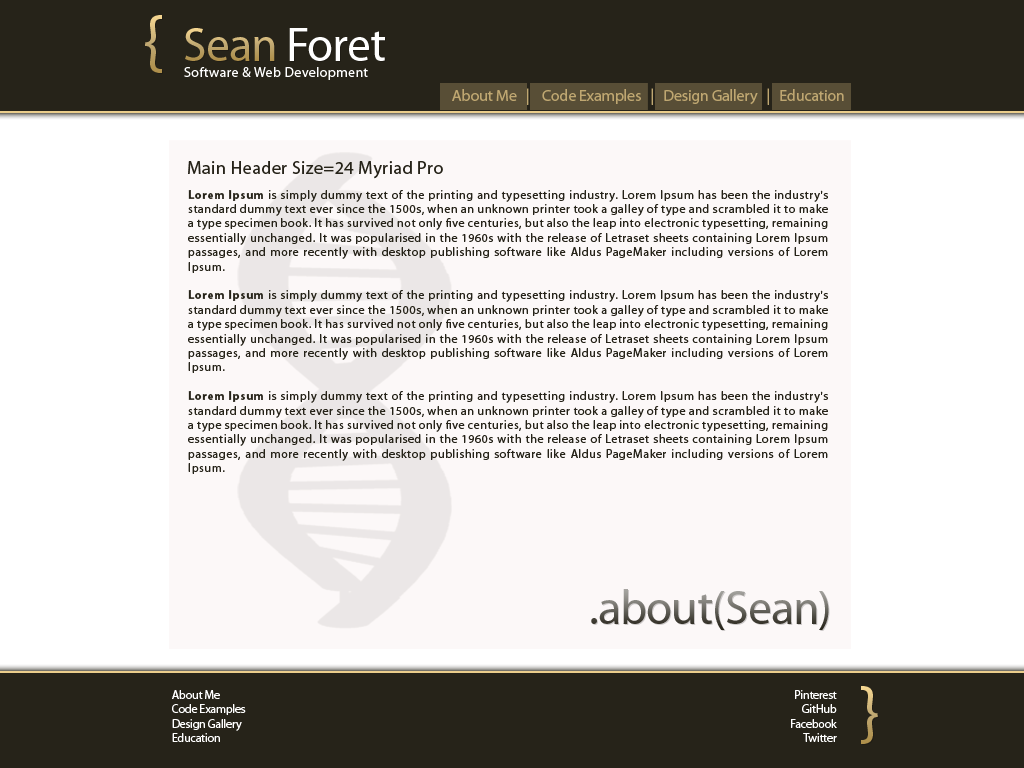
<style>
.page{position:relative;width:1024px;height:768px;background:#fcf8f8}
.page>*{position:absolute;margin:0}
.t1{font:72px "MyriadPro-Regular";letter-spacing:-0.02em}
.t2{font:48px "MyriadPro-Regular";letter-spacing:-0.02em;color:#ffffff}
.t3{font:48px "MyriadPro-Regular";letter-spacing:-0.02em;color:#bfa771}
.t4{font:14px "MyriadPro-Regular";letter-spacing:0.025em;color:#ffffff}
.t5{font:16.2px "MyriadPro-Regular";letter-spacing:-0.02em;color:#bfa771}
.t6{font:18px "MyriadPro-Regular";letter-spacing:0.025em;color:#262319}
.t7{font:12px "MyriadPro-Regular";letter-spacing:0.05em;color:#262319}
.t8{font:12px "MyriadPro-Bold";letter-spacing:0.05em;color:#262319}
.t9{font:48px "MyriadPro-Regular";letter-spacing:-0.02em}
.t10{font:12px "MyriadPro-Regular";letter-spacing:-0.02em;color:#ffffff}
</style>
<div class="page">
<p class="t1" style="left:145px;top:15px;width:17px;height:58px">{</p>
<p class="t2" style="left:185px;top:28px;width:200px;height:33px"><span class="t3">Sean</span> Foret</p>
<p class="t4" style="left:184px;top:67px;width:184px;height:13px">Software &amp; Web Development</p>
<p class="t5" style="left:452px;top:88px;width:392px;height:17px">About Me   |    Code Examples   |   Design Gallery   |   Education</p>
<p class="t6" style="left:188px;top:161px;width:255px;height:18px">Main Header Size=24 Myriad Pro</p>
<p class="t6" style="left:188px;top:161px;width:255px;height:18px">Main Header Size=24 Myriad Pro</p>
<p class="t6" style="left:188px;top:161px;width:255px;height:18px">Main Header Size=24 Myriad Pro</p>
<p class="t6" style="left:188px;top:161px;width:255px;height:18px">Main Header Size=24 Myriad Pro</p>
<p class="t7" style="left:188px;top:190px;width:640px;height:284px;text-align:justify"><span class="t8">Lorem Ipsum</span> is simply dummy text of the printing and typesetting industry. Lorem Ipsum has been the industry's standard dummy text ever since the 1500s, when an unknown printer took a galley of type and scrambled it to make a type specimen book. It has survived not only five centuries, but also the leap into electronic typesetting, remaining essentially unchanged. It was popularised in the 1960s with the release of Letraset sheets containing Lorem Ipsum passages, and more recently with desktop publishing software like Aldus PageMaker including versions of Lorem Ipsum.<br><br><span class="t8">Lorem Ipsum</span> is simply dummy text of the printing and typesetting industry. Lorem Ipsum has been the industry's standard dummy text ever since the 1500s, when an unknown printer took a galley of type and scrambled it to make a type specimen book. It has survived not only five centuries, but also the leap into electronic typesetting, remaining essentially unchanged. It was popularised in the 1960s with the release of Letraset sheets containing Lorem Ipsum passages, and more recently with desktop publishing software like Aldus PageMaker including versions of Lorem Ipsum.<br><br><span class="t8">Lorem Ipsum</span> is simply dummy text of the printing and typesetting industry. Lorem Ipsum has been the industry's standard dummy text ever since the 1500s, when an unknown printer took a galley of type and scrambled it to make a type specimen book. It has survived not only five centuries, but also the leap into electronic typesetting, remaining essentially unchanged. It was popularised in the 1960s with the release of Letraset sheets containing Lorem Ipsum passages, and more recently with desktop publishing software like Aldus PageMaker including versions of Lorem Ipsum.</p>
<p class="t7" style="left:188px;top:190px;width:640px;height:284px;text-align:justify"><span class="t8">Lorem Ipsum</span> is simply dummy text of the printing and typesetting industry. Lorem Ipsum has been the industry's standard dummy text ever since the 1500s, when an unknown printer took a galley of type and scrambled it to make a type specimen book. It has survived not only five centuries, but also the leap into electronic typesetting, remaining essentially unchanged. It was popularised in the 1960s with the release of Letraset sheets containing Lorem Ipsum passages, and more recently with desktop publishing software like Aldus PageMaker including versions of Lorem Ipsum.<br><br><span class="t8">Lorem Ipsum</span> is simply dummy text of the printing and typesetting industry. Lorem Ipsum has been the industry's standard dummy text ever since the 1500s, when an unknown printer took a galley of type and scrambled it to make a type specimen book. It has survived not only five centuries, but also the leap into electronic typesetting, remaining essentially unchanged. It was popularised in the 1960s with the release of Letraset sheets containing Lorem Ipsum passages, and more recently with desktop publishing software like Aldus PageMaker including versions of Lorem Ipsum.<br><br><span class="t8">Lorem Ipsum</span> is simply dummy text of the printing and typesetting industry. Lorem Ipsum has been the industry's standard dummy text ever since the 1500s, when an unknown printer took a galley of type and scrambled it to make a type specimen book. It has survived not only five centuries, but also the leap into electronic typesetting, remaining essentially unchanged. It was popularised in the 1960s with the release of Letraset sheets containing Lorem Ipsum passages, and more recently with desktop publishing software like Aldus PageMaker including versions of Lorem Ipsum.</p>
<p class="t7" style="left:188px;top:190px;width:640px;height:284px;text-align:justify"><span class="t8">Lorem Ipsum</span> is simply dummy text of the printing and typesetting industry. Lorem Ipsum has been the industry's standard dummy text ever since the 1500s, when an unknown printer took a galley of type and scrambled it to make a type specimen book. It has survived not only five centuries, but also the leap into electronic typesetting, remaining essentially unchanged. It was popularised in the 1960s with the release of Letraset sheets containing Lorem Ipsum passages, and more recently with desktop publishing software like Aldus PageMaker including versions of Lorem Ipsum.<br><br><span class="t8">Lorem Ipsum</span> is simply dummy text of the printing and typesetting industry. Lorem Ipsum has been the industry's standard dummy text ever since the 1500s, when an unknown printer took a galley of type and scrambled it to make a type specimen book. It has survived not only five centuries, but also the leap into electronic typesetting, remaining essentially unchanged. It was popularised in the 1960s with the release of Letraset sheets containing Lorem Ipsum passages, and more recently with desktop publishing software like Aldus PageMaker including versions of Lorem Ipsum.<br><br><span class="t8">Lorem Ipsum</span> is simply dummy text of the printing and typesetting industry. Lorem Ipsum has been the industry's standard dummy text ever since the 1500s, when an unknown printer took a galley of type and scrambled it to make a type specimen book. It has survived not only five centuries, but also the leap into electronic typesetting, remaining essentially unchanged. It was popularised in the 1960s with the release of Letraset sheets containing Lorem Ipsum passages, and more recently with desktop publishing software like Aldus PageMaker including versions of Lorem Ipsum.</p>
<p class="t7" style="left:188px;top:190px;width:640px;height:284px;text-align:justify"><span class="t8">Lorem Ipsum</span> is simply dummy text of the printing and typesetting industry. Lorem Ipsum has been the industry's standard dummy text ever since the 1500s, when an unknown printer took a galley of type and scrambled it to make a type specimen book. It has survived not only five centuries, but also the leap into electronic typesetting, remaining essentially unchanged. It was popularised in the 1960s with the release of Letraset sheets containing Lorem Ipsum passages, and more recently with desktop publishing software like Aldus PageMaker including versions of Lorem Ipsum.<br><br><span class="t8">Lorem Ipsum</span> is simply dummy text of the printing and typesetting industry. Lorem Ipsum has been the industry's standard dummy text ever since the 1500s, when an unknown printer took a galley of type and scrambled it to make a type specimen book. It has survived not only five centuries, but also the leap into electronic typesetting, remaining essentially unchanged. It was popularised in the 1960s with the release of Letraset sheets containing Lorem Ipsum passages, and more recently with desktop publishing software like Aldus PageMaker including versions of Lorem Ipsum.<br><br><span class="t8">Lorem Ipsum</span> is simply dummy text of the printing and typesetting industry. Lorem Ipsum has been the industry's standard dummy text ever since the 1500s, when an unknown printer took a galley of type and scrambled it to make a type specimen book. It has survived not only five centuries, but also the leap into electronic typesetting, remaining essentially unchanged. It was popularised in the 1960s with the release of Letraset sheets containing Lorem Ipsum passages, and more recently with desktop publishing software like Aldus PageMaker including versions of Lorem Ipsum.</p>
<p class="t9" style="left:591px;top:589px;width:238px;height:41px">.about(Sean)</p>
<p class="t1" style="left:861px;top:686px;width:17px;height:58px">}</p>
<p class="t10" style="left:172px;top:690px;width:74px;height:52px">About Me<br>Code Examples<br>Design Gallery<br>Education</p>
<p class="t10" style="left:791px;top:690px;width:46px;height:52px;text-align:right">Pinterest<br>GitHub<br>Facebook<br>Twitter</p>
</div>
